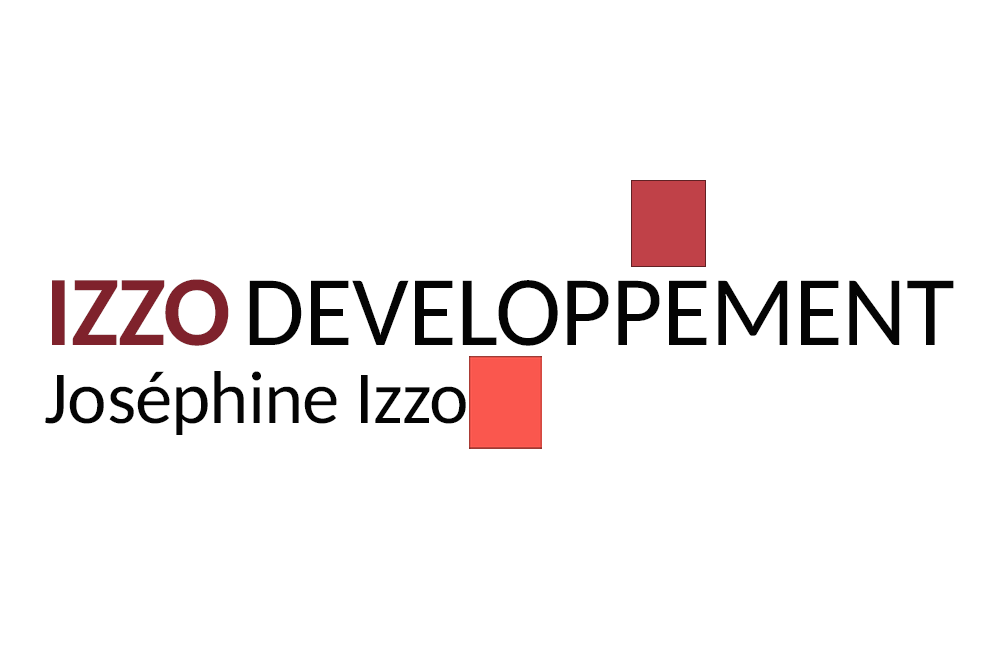
<style>
.page{position:relative;width:1004px;height:650px;background:#ffffff}
.page>*{position:absolute;margin:0}
.t1{font:100px "Carlito";letter-spacing:-0.01em;color:#040404}
.t2{font:100px "Carlito-Bold";letter-spacing:-0.01em;color:#7f222c}
.t3{font:75px "Carlito";letter-spacing:-0.01em;color:#040404}
</style>
<div class="page">
<p class="t1" style="left:52px;top:279px;width:902px;height:67px"><span class="t2">IZZO </span>DEVELOPPEMENT</p>
<p class="t3" style="left:45px;top:371px;width:421px;height:64px">Joséphine Izzo</p>
</div>
